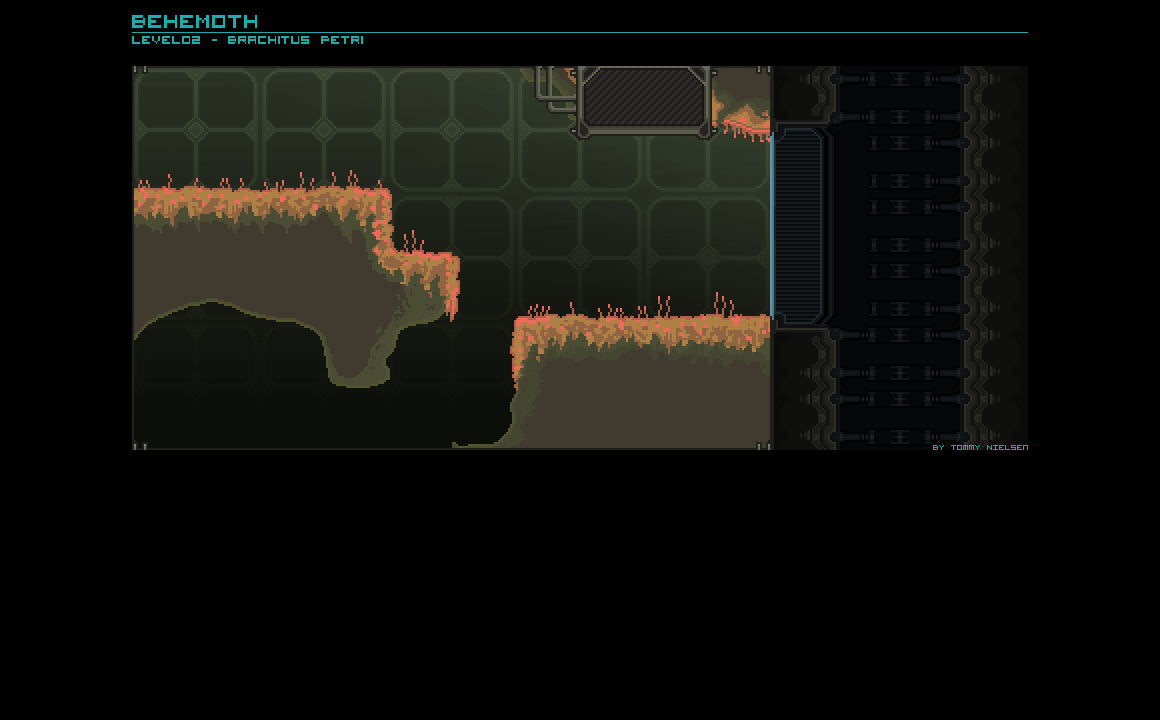
<style>
.page{position:relative;width:1160px;height:720px;background:#000000}
.page>*{position:absolute;margin:0}
.t1{font:26px "VisitorTT1BRK";color:#20aaac}
.t2{font:16px "VisitorTT1BRK";color:#20aaac}
.t3{font:10px "VisitorTT1BRK";color:#20aaac}
</style>
<div class="page">
<p class="t1" style="left:132px;top:15px;width:125px;height:13px">BEHEMOTH</p>
<p class="t2" style="left:132px;top:36px;width:231px;height:8px">Level02 - Brachitus Petri</p>
<p class="t3" style="left:933px;top:445px;width:95px;height:5px">By Tommy NIelsen</p>
</div>
